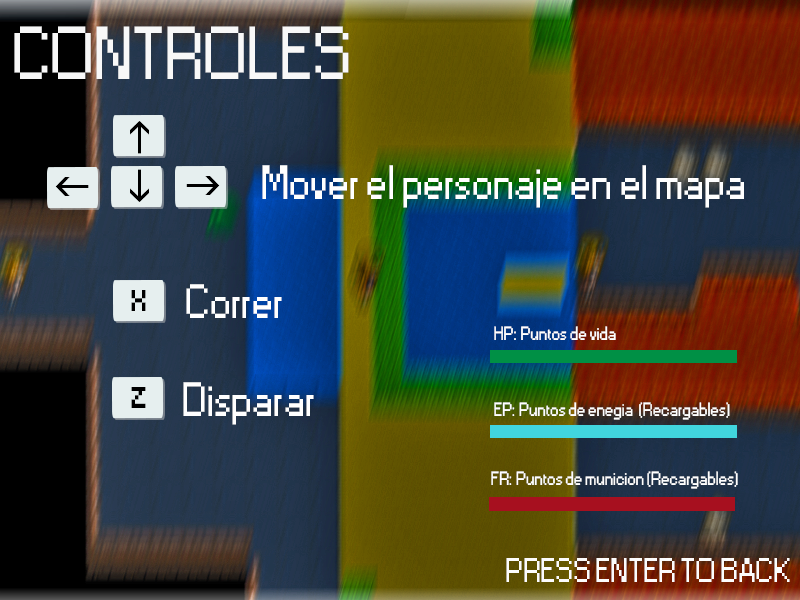
<style>
.page{position:relative;width:800px;height:600px}
.page>*{position:absolute;margin:0}
.t1{font:70px "Small Fonts";color:#f8f8f8}
.t2{font:45px "Small Fonts";color:#ffffff}
.t3{font:45px "Small Fonts";color:#000000}
.t4{font:18px "Small Fonts";color:#ffffff}
.t5{font:32px "Small Fonts";color:#fcfcfc}
</style>
<div class="page">
<p class="t1" style="left:14px;top:26px;width:335px;height:53px">CONTROLES</p>
<p class="t2" style="left:262px;top:165px;width:482px;height:43px">Mover el personaje en el mapa</p>
<p class="t3" style="left:131px;top:290px;width:15px;height:21px">x</p>
<p class="t2" style="left:186px;top:284px;width:96px;height:34px">Correr</p>
<p class="t4" style="left:494px;top:326px;width:122px;height:14px">HP: Puntos de vida</p>
<p class="t3" style="left:131px;top:387px;width:15px;height:21px">z</p>
<p class="t2" style="left:183px;top:382px;width:131px;height:43px">Disparar</p>
<p class="t4" style="left:494px;top:402px;width:236px;height:18px">EP: Puntos de enegia  (Recargables)</p>
<p class="t4" style="left:491px;top:471px;width:247px;height:18px">FR: Puntos de municion (Recargables)</p>
<p class="t5" style="left:506px;top:558px;width:284px;height:24px">PRESS ENTER TO BACK</p>
</div>
